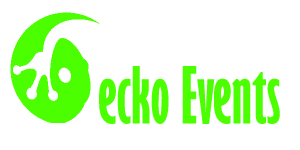
<style>
.page{position:relative;width:300px;height:150px;background:#ffffff}
.page>*{position:absolute;margin:0}
.t1{font:72px "GillSansMT-ExtraCondensedBold";color:#4cff00}
</style>
<div class="page">
<p class="t1" style="left:99px;top:66px;width:181px;height:58px">ecko Events</p>
</div>
